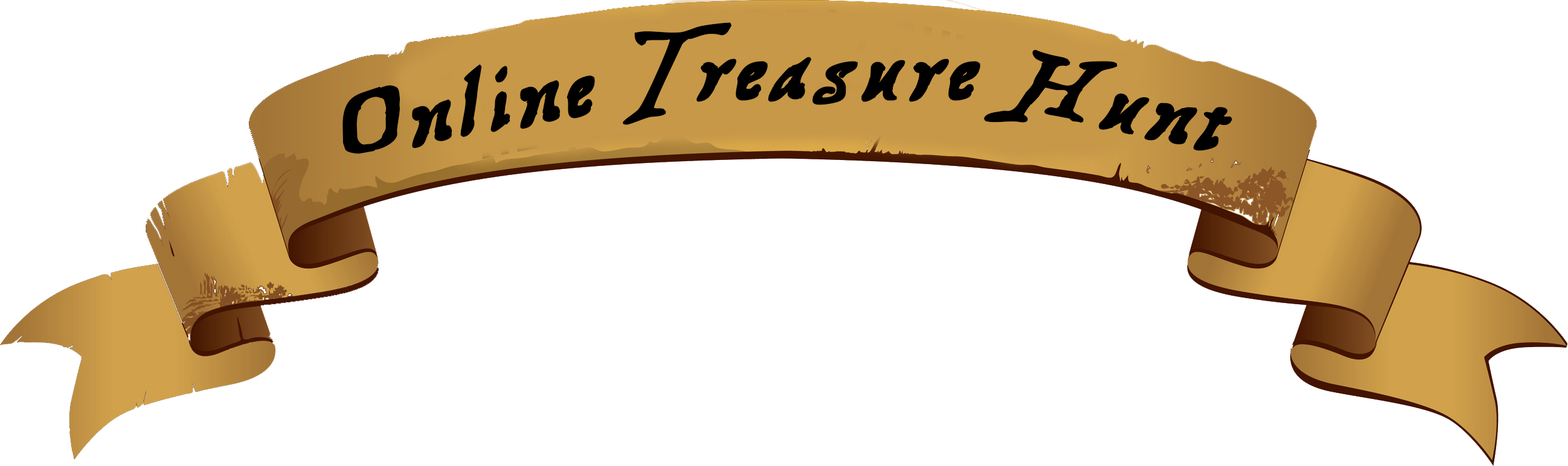
<style>
.page{position:relative;width:1568px;height:466px;background:#ffffff}
.page>*{position:absolute;margin:0}
.t1{font:113.3px "TreasureMapDeadhand";color:#000000;font-weight:bold}
</style>
<div class="page">
<p class="t1" style="left:623px;top:22px;width:357px;height:103px">Treasure</p>
<p class="t1" style="left:984px;top:50px;width:248px;height:101px;rotate:13deg">Hunt</p>
<p class="t1" style="left:342px;top:64px;width:253px;height:90px;rotate:-10deg">Online</p>
</div>
